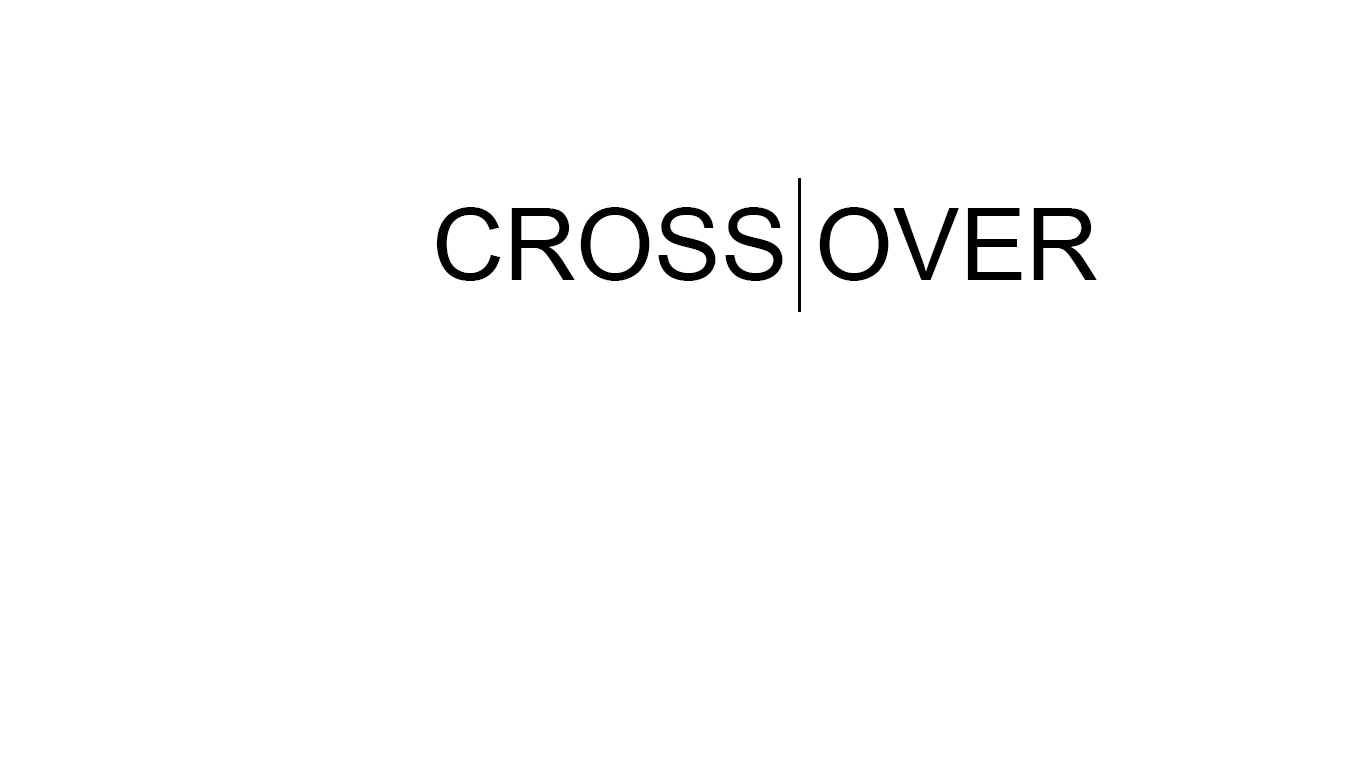
<style>
.page{position:relative;width:1366px;height:768px;background:#ffffff}
.page>*{position:absolute;margin:0}
.t1{font:100px "ArialMT";color:#000000}
</style>
<div class="page">
<p class="t1" style="left:436px;top:207px;width:661px;height:74px">CROSS OVER</p>
</div>
